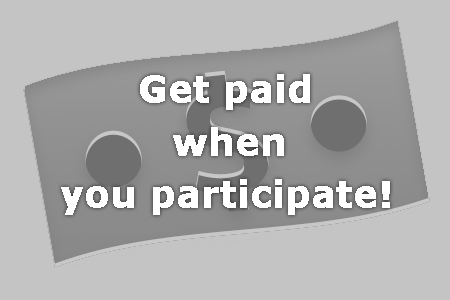
<style>
.page{position:relative;width:450px;height:300px;background:#c4c4c4}
.page>*{position:absolute;margin:0}
.t1{font:36px "Verdana-Bold";color:#ffffff;font-weight:bold}
</style>
<div class="page">
<p class="t1" style="left:140px;top:74px;width:170px;height:36px">Get paid</p>
<p class="t1" style="left:173px;top:127px;width:111px;height:29px">when</p>
<p class="t1" style="left:61px;top:179px;width:329px;height:36px">you participate!</p>
</div>
